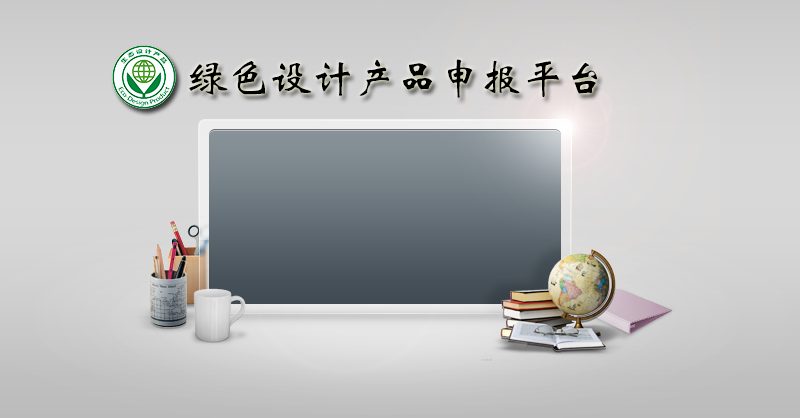
<style>
.page{position:relative;width:800px;height:418px}
.page>*{position:absolute;margin:0}
.t1{font:42px "STXinwei";color:#000000}
</style>
<div class="page">
<p class="t1" style="left:189px;top:59px;width:409px;height:39px">绿色设计产品申报平台</p>
</div>
